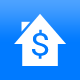
<style>
.page{position:relative;width:80px;height:80px;background:#007aff}
.page>*{position:absolute;margin:0}
.t1{font:31.2px "Roboto-Regular";color:#007aff;scale:1.15 1}
</style>
<div class="page">
<p class="t1" style="left:32px;top:29px;width:17px;height:30px">$</p>
</div>
